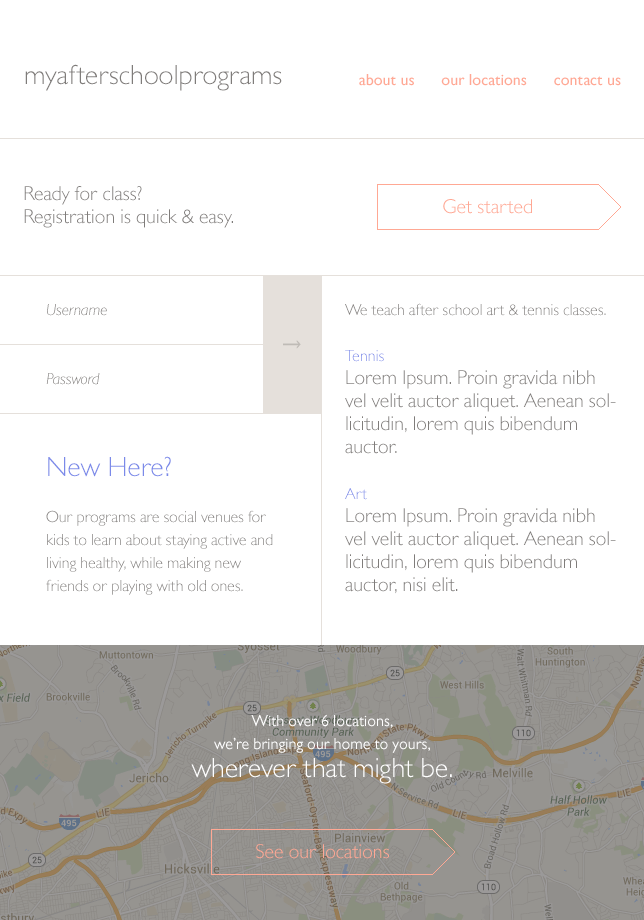
<style>
.page{position:relative;width:644px;height:920px;background:#ffffff}
.page>*{position:absolute;margin:0}
.t1{font:28px "GillSansMTPro-Light";color:#7f7c7a}
.t2{font:16px "GillSansMTPro-Medium";color:#ffa894}
.t3{font:20px/23px "GillSansMTPro-Light";color:#7f7c7a}
.t4{font:16px "GillSansMTPro-LightItalic"}
.t5{font:16px/23px "GillSansMTPro-Light";color:#7f7c7a}
.t6{font:16px/23px "GillSansMTPro-Light";color:#7b8ae9}
.t7{font:16px "GillSansMTPro-LightItalic";color:#7f7c7a}
.t8{font:28px/23px "GillSansMTPro-Light";color:#7b8ae9}
.t9{font:16px/23px "GillSansMTPro-Book";color:#ffffff}
.t10{font:28px/28px "GillSansMTPro-Light";color:#ffffff}
.t11{font:20px "GillSansMTPro-Light";color:#ffa894}
</style>
<div class="page">
<p class="t1" style="left:25px;top:64px;width:257px;height:27px">myafterschoolprograms</p>
<p class="t2" style="left:359px;top:74px;width:262px;height:12px">about us      our locations      contact us</p>
<p class="t3" style="left:24px;top:186px;width:209px;height:42px">Ready for class? <br>Registration is quick &amp; easy.</p>
<p class="t4" style="left:47px;top:304px;width:60px;height:12px">Username</p>
<p class="t3" style="left:345px;top:303px;width:271px;height:291px"><span class="t5">We teach after school art &amp; tennis classes.<br></span><span class="t6"><br>Tennis<br></span>Lorem Ipsum. Proin gravida nibh vel velit auctor aliquet. Aenean sollicitudin, lorem quis bibendum auctor.<br><br><span class="t6">Art<br></span>Lorem Ipsum. Proin gravida nibh vel velit auctor aliquet. Aenean sollicitudin, lorem quis bibendum auctor, nisi elit.</p>
<p class="t7" style="left:46px;top:373px;width:54px;height:12px">Password</p>
<p class="t5" style="left:46px;top:456px;width:227px;height:139px"><span class="t8">New Here?<br></span><br>Our programs are social venues for kids to learn about staying active and living healthy, while making new friends or playing with old ones.</p>
<p class="t9" style="left:191px;top:714px;width:261px;height:70px;text-align:center">With over 6 locations,<br>we’re bringing our home to yours,<br><span class="t10">wherever that might be.</span></p>
<p class="t11" style="left:256px;top:844px;width:133px;height:15px">See our locations</p>
</div>
